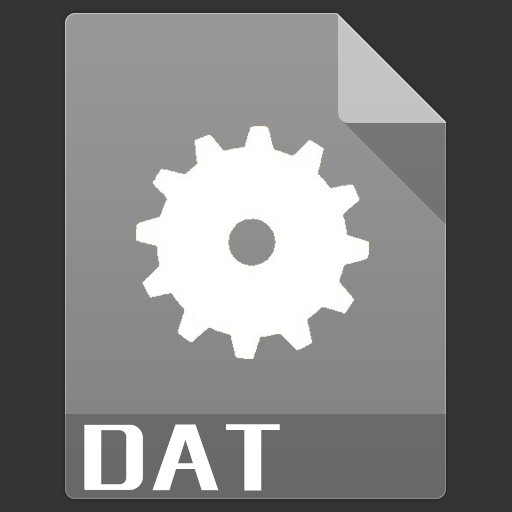
<style>
.page{position:relative;width:512px;height:512px;background:#333333}
.page>*{position:absolute;margin:0}
.t1{font:72px "MFLiHei_Noncommercial-Regular";letter-spacing:0.07em;color:#ffffff}
</style>
<div class="page">
<p class="t1" style="left:84px;top:424px;width:196px;height:67px">DAT</p>
</div>
